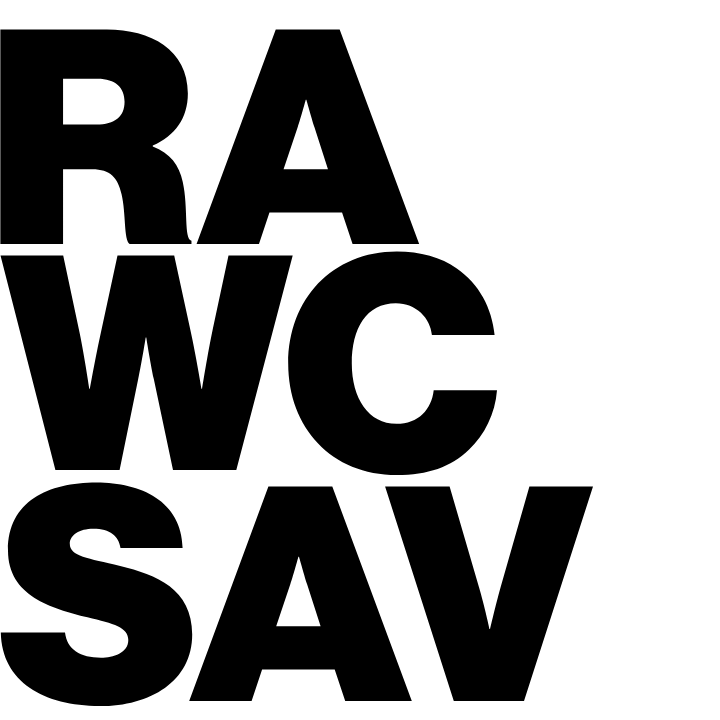
<style>
.page{position:relative;width:720px;height:720px;background:#ffffff}
.page>*{position:absolute;margin:0}
.t1{font:300px "NHaasGroteskDSPro-95Blk";color:#000000}
</style>
<div class="page">
<p class="t1" style="left:0px;top:29px;width:420px;height:216px">RA</p>
<p class="t1" style="left:0px;top:251px;width:497px;height:225px">WC</p>
<p class="t1" style="left:0px;top:482px;width:593px;height:225px">SAV</p>
</div>
